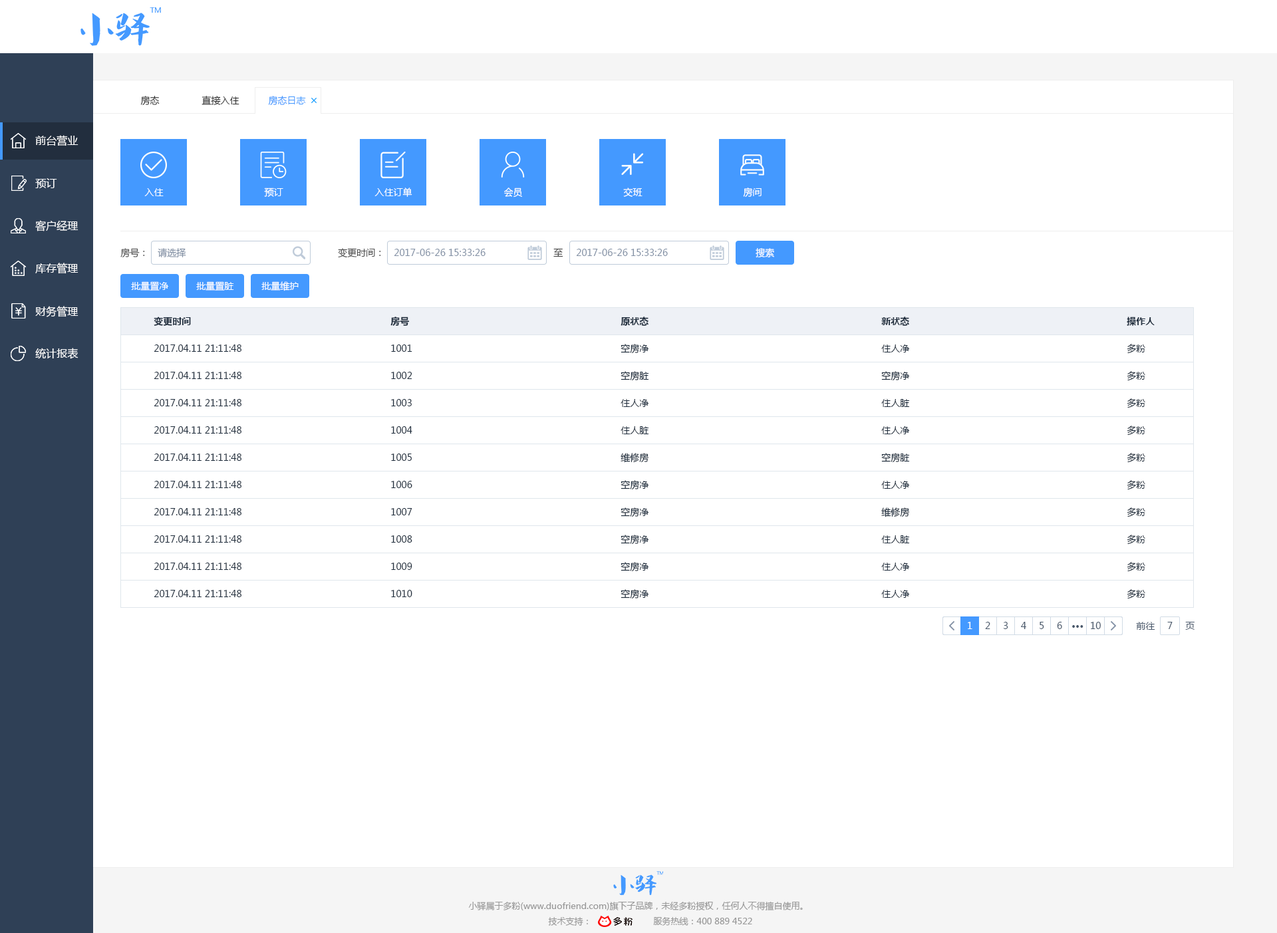
<style>
.page{position:relative;width:1277px;height:933px;background:#ffffff}
.page>*{position:absolute;margin:0}
.t1{font:9.3px "MicrosoftYaHei";color:#333333}
.t2{font:9.3px "MicrosoftYaHei";color:#4499ff}
.t3{font:10.6px "MicrosoftYaHei";color:#ffffff}
.t4{font:9.3px "MicrosoftYaHei";color:#ffffff}
.t5{font:9.3px "MicrosoftYaHei";color:#505050}
.t6{font:9.3px "MicrosoftYaHei";color:#8391a5}
.t7{font:9.3px "MicrosoftYaHei-Bold";color:#1f2d3d}
.t8{font:9.3px "MicrosoftYaHei";color:#1f2d3d}
.t9{font:9.3px "MicrosoftYaHei";color:#48576a}
.t10{font:9.3px "MicrosoftYaHei-Bold";color:#48576a}
.t11{font:8.6px "MicrosoftYaHei";color:#999999}
</style>
<div class="page">
<p class="t1" style="left:140px;top:96px;width:20px;height:9px">房态</p>
<p class="t1" style="left:202px;top:96px;width:38px;height:9px">直接入住</p>
<p class="t2" style="left:268px;top:96px;width:38px;height:9px">房态日志</p>
<p class="t3" style="left:35px;top:135px;width:44px;height:11px">前台营业</p>
<p class="t3" style="left:35px;top:178px;width:22px;height:10px">预订</p>
<p class="t4" style="left:144px;top:188px;width:20px;height:8px">入住</p>
<p class="t4" style="left:264px;top:188px;width:19px;height:9px">预订</p>
<p class="t4" style="left:375px;top:188px;width:38px;height:9px">入住订单</p>
<p class="t4" style="left:504px;top:188px;width:18px;height:10px">会员</p>
<p class="t4" style="left:623px;top:188px;width:20px;height:9px">交班</p>
<p class="t4" style="left:743px;top:188px;width:19px;height:9px">房间</p>
<p class="t3" style="left:35px;top:220px;width:44px;height:12px">客户经理</p>
<p class="t5" style="left:120px;top:248px;width:25px;height:10px">房号：</p>
<p class="t6" style="left:158px;top:248px;width:28px;height:9px">请选择</p>
<p class="t5" style="left:338px;top:248px;width:43px;height:10px">变更时间：</p>
<p class="t6" style="left:394px;top:249px;width:92px;height:7px">2017-06-26 15:33:26</p>
<p class="t5" style="left:554px;top:248px;width:10px;height:9px">至</p>
<p class="t6" style="left:576px;top:249px;width:92px;height:7px">2017-06-26 15:33:26</p>
<p class="t4" style="left:756px;top:248px;width:18px;height:10px">搜索</p>
<p class="t3" style="left:35px;top:263px;width:44px;height:11px">库存管理</p>
<p class="t4" style="left:131px;top:281px;width:38px;height:10px">批量置净</p>
<p class="t4" style="left:196px;top:281px;width:38px;height:10px">批量置脏</p>
<p class="t4" style="left:261px;top:281px;width:38px;height:10px">批量维护</p>
<p class="t3" style="left:35px;top:306px;width:44px;height:11px">财务管理</p>
<p class="t7" style="left:154px;top:317px;width:37px;height:9px">变更时间</p>
<p class="t7" style="left:391px;top:317px;width:18px;height:9px">房号</p>
<p class="t7" style="left:621px;top:317px;width:28px;height:9px">原状态</p>
<p class="t7" style="left:882px;top:317px;width:28px;height:9px">新状态</p>
<p class="t7" style="left:1127px;top:317px;width:28px;height:9px">操作人</p>
<p class="t3" style="left:35px;top:348px;width:44px;height:11px">统计报表</p>
<p class="t8" style="left:154px;top:345px;width:88px;height:7px">2017.04.11 21:11:48</p>
<p class="t8" style="left:391px;top:345px;width:22px;height:7px">1001</p>
<p class="t8" style="left:621px;top:344px;width:28px;height:10px">空房净</p>
<p class="t8" style="left:882px;top:345px;width:28px;height:8px">住人净</p>
<p class="t8" style="left:1127px;top:344px;width:19px;height:10px">多粉</p>
<p class="t8" style="left:154px;top:372px;width:88px;height:7px">2017.04.11 21:11:48</p>
<p class="t8" style="left:391px;top:372px;width:22px;height:7px">1002</p>
<p class="t8" style="left:621px;top:371px;width:28px;height:10px">空房脏</p>
<p class="t8" style="left:882px;top:371px;width:28px;height:10px">空房净</p>
<p class="t8" style="left:1127px;top:371px;width:19px;height:10px">多粉</p>
<p class="t8" style="left:154px;top:399px;width:88px;height:8px">2017.04.11 21:11:48</p>
<p class="t8" style="left:391px;top:399px;width:21px;height:8px">1003</p>
<p class="t8" style="left:621px;top:399px;width:28px;height:8px">住人净</p>
<p class="t8" style="left:882px;top:399px;width:28px;height:8px">住人脏</p>
<p class="t8" style="left:1127px;top:399px;width:19px;height:10px">多粉</p>
<p class="t8" style="left:1127px;top:426px;width:19px;height:10px">多粉</p>
<p class="t8" style="left:154px;top:426px;width:88px;height:8px">2017.04.11 21:11:48</p>
<p class="t8" style="left:391px;top:426px;width:22px;height:8px">1004</p>
<p class="t8" style="left:621px;top:426px;width:28px;height:8px">住人脏</p>
<p class="t8" style="left:882px;top:426px;width:28px;height:8px">住人净</p>
<p class="t8" style="left:154px;top:454px;width:88px;height:7px">2017.04.11 21:11:48</p>
<p class="t8" style="left:391px;top:454px;width:21px;height:7px">1005</p>
<p class="t8" style="left:621px;top:453px;width:28px;height:10px">维修房</p>
<p class="t8" style="left:882px;top:453px;width:28px;height:10px">空房脏</p>
<p class="t8" style="left:1127px;top:453px;width:19px;height:10px">多粉</p>
<p class="t8" style="left:154px;top:481px;width:88px;height:7px">2017.04.11 21:11:48</p>
<p class="t8" style="left:391px;top:481px;width:22px;height:7px">1006</p>
<p class="t8" style="left:621px;top:480px;width:28px;height:10px">空房净</p>
<p class="t8" style="left:882px;top:481px;width:28px;height:8px">住人净</p>
<p class="t8" style="left:1127px;top:480px;width:19px;height:10px">多粉</p>
<p class="t8" style="left:154px;top:508px;width:88px;height:8px">2017.04.11 21:11:48</p>
<p class="t8" style="left:391px;top:508px;width:22px;height:8px">1007</p>
<p class="t8" style="left:621px;top:508px;width:28px;height:10px">空房净</p>
<p class="t8" style="left:882px;top:508px;width:28px;height:10px">维修房</p>
<p class="t8" style="left:1127px;top:508px;width:19px;height:10px">多粉</p>
<p class="t8" style="left:154px;top:536px;width:88px;height:7px">2017.04.11 21:11:48</p>
<p class="t8" style="left:391px;top:536px;width:22px;height:7px">1008</p>
<p class="t8" style="left:621px;top:535px;width:28px;height:10px">空房净</p>
<p class="t8" style="left:882px;top:536px;width:28px;height:8px">住人脏</p>
<p class="t8" style="left:1127px;top:535px;width:19px;height:10px">多粉</p>
<p class="t8" style="left:154px;top:563px;width:88px;height:7px">2017.04.11 21:11:48</p>
<p class="t8" style="left:391px;top:563px;width:22px;height:7px">1009</p>
<p class="t8" style="left:621px;top:562px;width:28px;height:10px">空房净</p>
<p class="t8" style="left:882px;top:563px;width:28px;height:8px">住人净</p>
<p class="t8" style="left:1127px;top:562px;width:19px;height:10px">多粉</p>
<p class="t8" style="left:154px;top:590px;width:88px;height:7px">2017.04.11 21:11:48</p>
<p class="t8" style="left:391px;top:590px;width:22px;height:7px">1010</p>
<p class="t8" style="left:621px;top:589px;width:28px;height:10px">空房净</p>
<p class="t8" style="left:882px;top:590px;width:28px;height:8px">住人净</p>
<p class="t8" style="left:1127px;top:589px;width:19px;height:10px">多粉</p>
<p class="t4" style="left:968px;top:622px;width:5px;height:7px">1</p>
<p class="t9" style="left:985px;top:622px;width:6px;height:7px">2</p>
<p class="t9" style="left:1003px;top:622px;width:6px;height:7px">3</p>
<p class="t9" style="left:1021px;top:622px;width:6px;height:7px">4</p>
<p class="t9" style="left:1040px;top:622px;width:5px;height:7px">5</p>
<p class="t9" style="left:1057px;top:622px;width:6px;height:7px">6</p>
<p class="t10" style="left:1073px;top:625px;width:11px;height:3px">···</p>
<p class="t9" style="left:1091px;top:622px;width:10px;height:7px">10</p>
<p class="t9" style="left:1136px;top:622px;width:20px;height:8px">前往</p>
<p class="t9" style="left:1168px;top:622px;width:5px;height:7px">7</p>
<p class="t9" style="left:1186px;top:622px;width:9px;height:8px">页</p>
<p class="t11" style="left:468px;top:902px;width:335px;height:9px">小驿属于多粉(www.duofriend.com)旗下子品牌，未经多粉授权，任何人不得擅自使用。</p>
<p class="t11" style="left:548px;top:917px;width:40px;height:9px">技术支持：</p>
<p class="t11" style="left:653px;top:917px;width:99px;height:9px">服务热线：400 889 4522</p>
</div>
